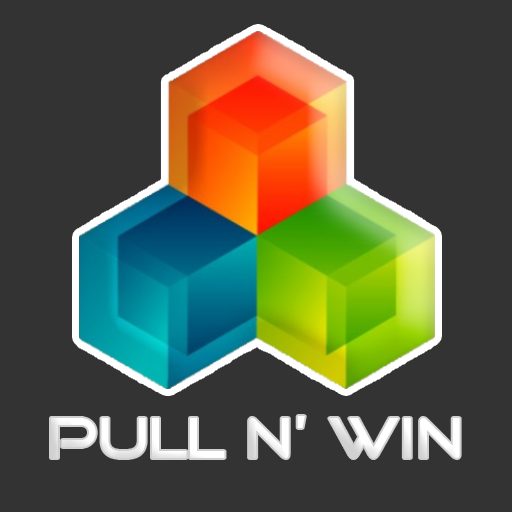
<style>
.page{position:relative;width:512px;height:512px;background:#333333}
.page>*{position:absolute;margin:0}
.t1{font:55.6px "GoodTimes";color:#ffffff}
</style>
<div class="page">
<p class="t1" style="left:51px;top:416px;width:409px;height:42px">PULL n’ WIN</p>
</div>
